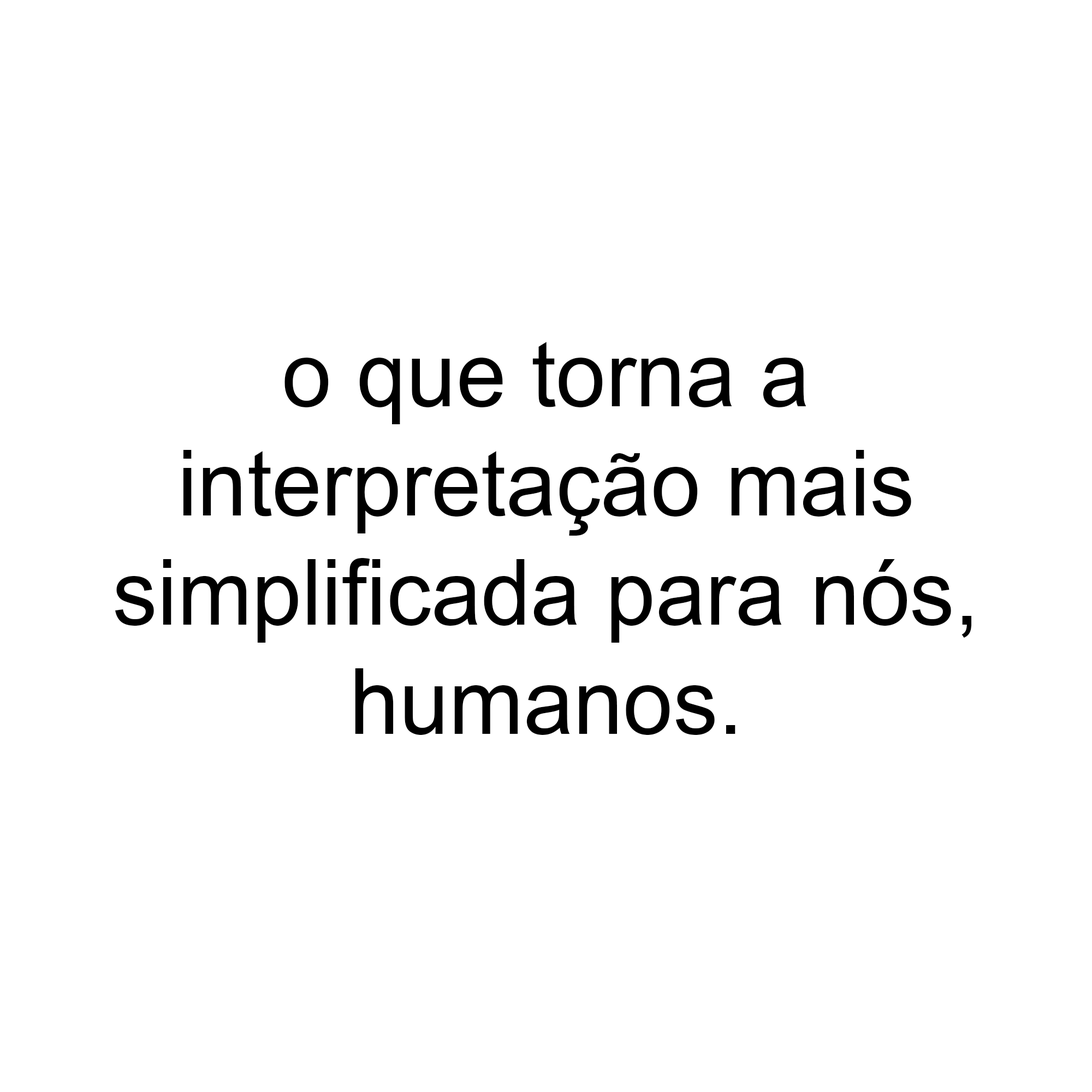
<style>
.page{position:relative;width:1092px;height:1092px;background:#ffffff}
.page>*{position:absolute;margin:0}
.t1{font:91px "ArialMT";color:#000000}
</style>
<div class="page">
<p class="t1" style="left:115px;top:342px;width:856px;height:393px;text-align:center">o que torna a<br>interpretação mais<br>simplificada para nós,<br>humanos.</p>
</div>
